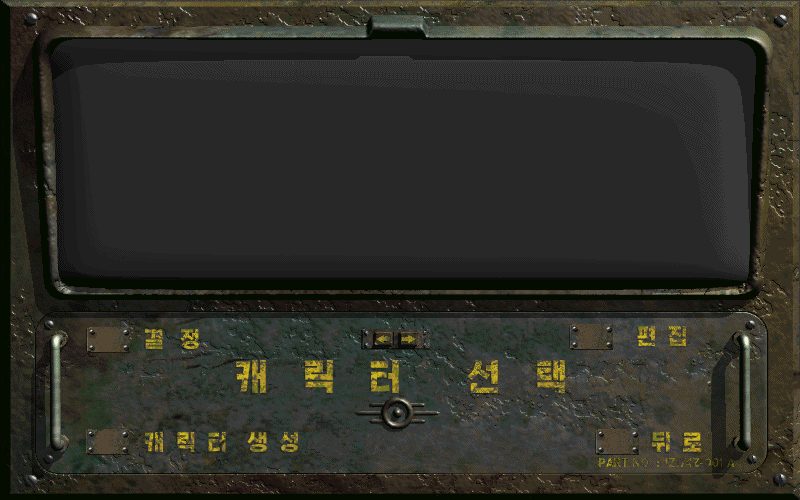
<style>
.page{position:relative;width:800px;height:500px;background:#282828}
.page>*{position:absolute;margin:0}
.t1{font:22px "HakgyoansimPosterB"}
.t2{font:36px "HakgyoansimPosterB"}
</style>
<div class="page">
<p class="t1" style="left:145px;top:329px;width:54px;height:20px">결   정</p>
<p class="t1" style="left:637px;top:326px;width:49px;height:20px">편  집</p>
<p class="t2" style="left:236px;top:360px;width:329px;height:33px">캐    릭    터        선    택</p>
<p class="t1" style="left:145px;top:431px;width:153px;height:21px">캐  릭  터    생  성</p>
<p class="t1" style="left:652px;top:431px;width:50px;height:21px">뒤  로</p>
</div>
